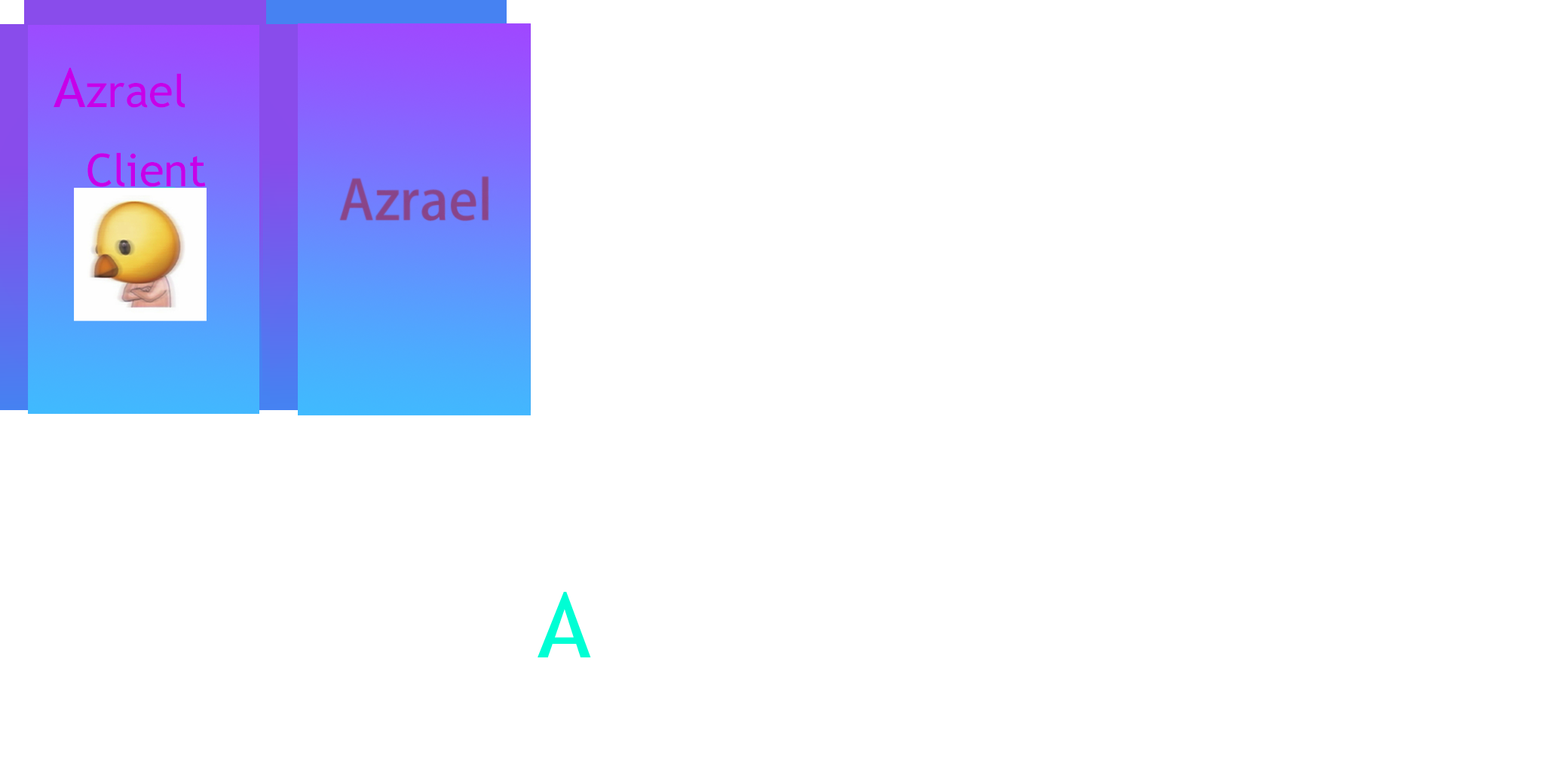
<style>
.page{position:relative;width:1544px;height:772px;background:#ffffff}
.page>*{position:absolute;margin:0}
.t1{font:54.3px "TrebuchetMS";color:#c600e9}
.t2{font:45.2px "TrebuchetMS";color:#c600e9}
.t3{font:90.5px "TrebuchetMS";color:#00fed4}
</style>
<div class="page">
<p class="t1" style="left:54px;top:67px;width:32px;height:40px">A</p>
<p class="t2" style="left:87px;top:73px;width:119px;height:114px">zrael<br>Client</p>
<p class="t3" style="left:538px;top:592px;width:53px;height:66px">A</p>
</div>
